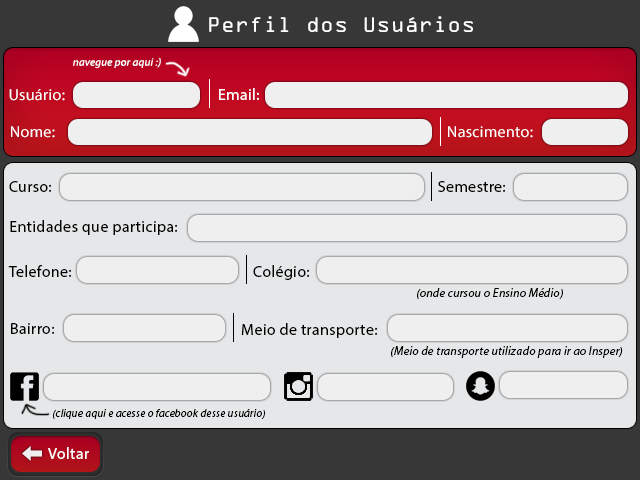
<style>
.page{position:relative;width:640px;height:480px;background:#e6e7e8}
.page>*{position:absolute;margin:0}
.t1{font:22.7px "OCRAExtended";letter-spacing:0.02em;color:#ffffff}
.t2{font:11px "MyriadPro-It";letter-spacing:0.02em;color:#ffffff}
.t3{font:16px "MyriadPro-Regular";letter-spacing:0.02em;color:#ffffff}
.t4{font:16px "MyriadPro-Regular";letter-spacing:0.02em;color:#000000}
.t5{font:12px "MyriadPro-It";letter-spacing:0.02em;color:#000000}
.t6{font:11px "MyriadPro-It";letter-spacing:0.02em;color:#000000}
</style>
<div class="page">
<p class="t1" style="left:209px;top:16px;width:264px;height:16px">Perfil dos Usuários</p>
<p class="t2" style="left:73px;top:58px;width:88px;height:11px">navegue por aqui :)</p>
<p class="t3" style="left:9px;top:89px;width:56px;height:12px">Usuário:</p>
<p class="t3" style="left:219px;top:88px;width:40px;height:12px">Email:</p>
<p class="t3" style="left:11px;top:126px;width:44px;height:12px">Nome:</p>
<p class="t3" style="left:448px;top:126px;width:85px;height:12px">Nascimento:</p>
<p class="t4" style="left:9px;top:181px;width:43px;height:11px">Curso:</p>
<p class="t4" style="left:438px;top:181px;width:68px;height:11px">Semestre:</p>
<p class="t4" style="left:10px;top:220px;width:168px;height:15px">Entidades que participa:</p>
<p class="t4" style="left:8px;top:265px;width:64px;height:12px">Telefone:</p>
<p class="t4" style="left:253px;top:265px;width:57px;height:15px">Colégio:</p>
<p class="t5" style="left:417px;top:288px;width:146px;height:11px">(onde cursou o Ensino Médio)</p>
<p class="t4" style="left:11px;top:323px;width:44px;height:11px">Bairro:</p>
<p class="t4" style="left:241px;top:323px;width:137px;height:15px">Meio de transporte:</p>
<p class="t5" style="left:391px;top:346px;width:232px;height:12px">(Meio de transporte utilizado para ir ao Insper)</p>
<p class="t6" style="left:53px;top:409px;width:212px;height:10px">(clique aqui e acesse o facebook desse usuário)</p>
<p class="t3" style="left:48px;top:447px;width:41px;height:12px">Voltar</p>
</div>
